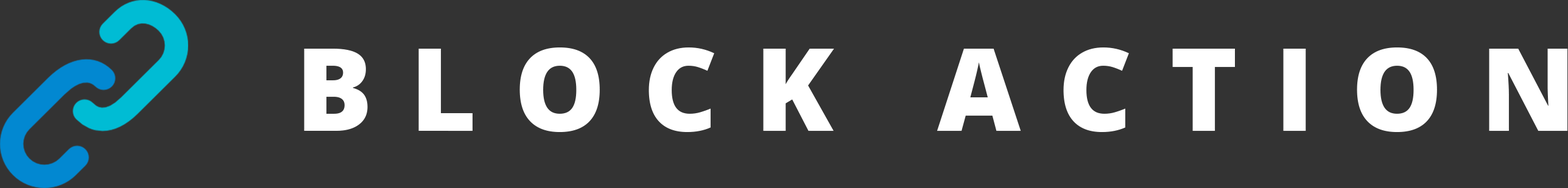
<style>
.page{position:relative;width:1568px;height:188px;background:#333333}
.page>*{position:absolute;margin:0}
.t1{font:115.2px "OpenSans-Extrabold";letter-spacing:0.32em;color:#ffffff}
</style>
<div class="page">
<p class="t1" style="left:304px;top:47px;width:1264px;height:85px">BLOCK ACTION</p>
</div>
